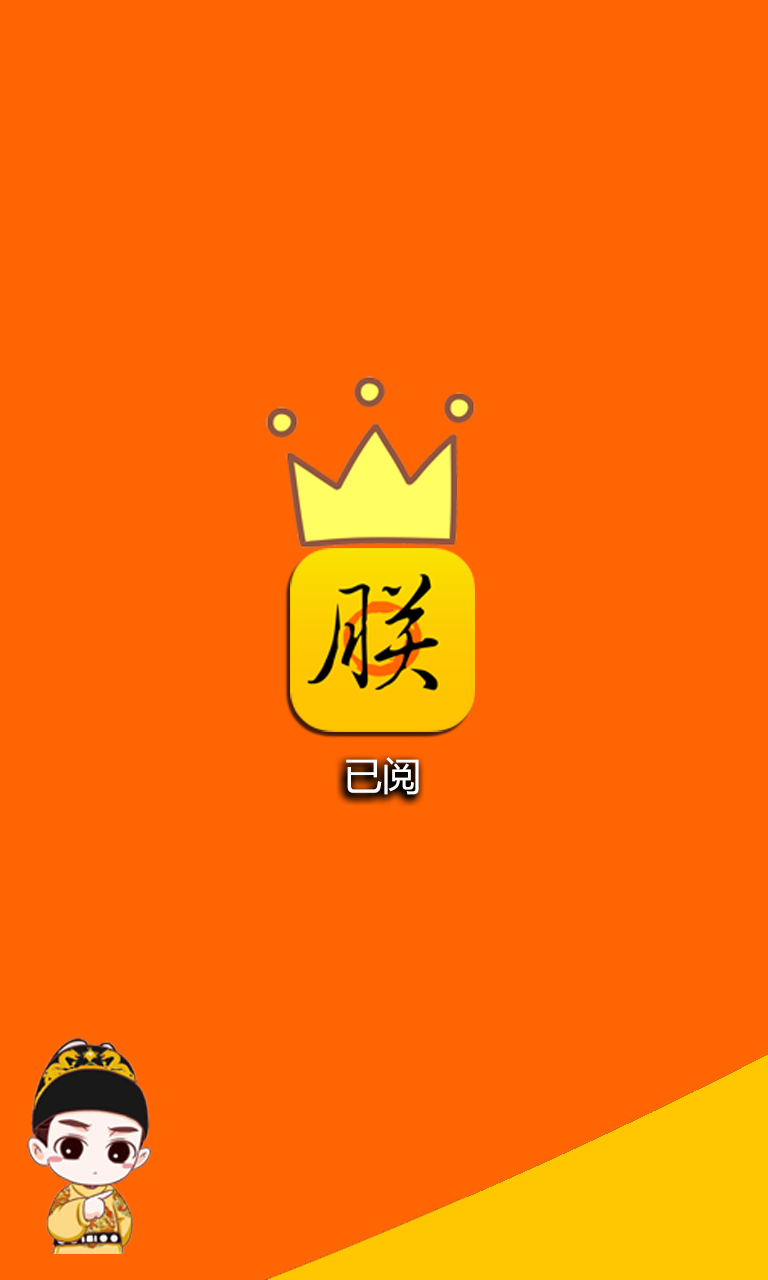
<style>
.page{position:relative;width:768px;height:1280px;background:#ff6503}
.page>*{position:absolute;margin:0}
.t1{font:38.6px "MicrosoftYaHei";color:#ffffff}
</style>
<div class="page">
<p class="t1" style="left:346px;top:757px;width:73px;height:38px">已阅</p>
</div>
